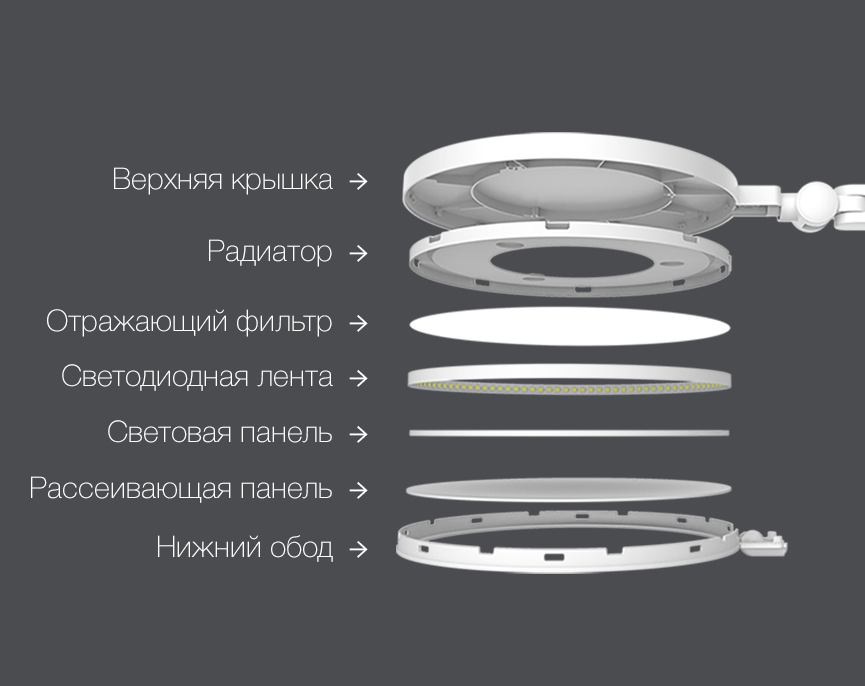
<style>
.page{position:relative;width:865px;height:686px;background:#4b4c50}
.page>*{position:absolute;margin:0}
.t1{font:30px "HelveticaNeueCyr-Thin";color:#ffffff}
.t2{font:30px "MinionPro-Regular";color:#ffffff}
</style>
<div class="page">
<p class="t1" style="left:114px;top:167px;width:254px;height:28px">Верхняя крышка  <span class="t2">→</span></p>
<p class="t1" style="left:209px;top:239px;width:159px;height:28px">Радиатор  <span class="t2">→</span></p>
<p class="t1" style="left:47px;top:309px;width:321px;height:28px">Отражающий фильтр  <span class="t2">→</span></p>
<p class="t1" style="left:62px;top:364px;width:306px;height:27px">Светодиодная лента  <span class="t2">→</span></p>
<p class="t1" style="left:108px;top:420px;width:260px;height:23px">Световая панель  <span class="t2">→</span></p>
<p class="t1" style="left:31px;top:476px;width:337px;height:27px">Рассеивающая панель  <span class="t2">→</span></p>
<p class="t1" style="left:158px;top:535px;width:210px;height:27px">Нижний обод  <span class="t2">→</span></p>
</div>
